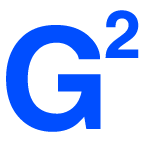
<style>
.page{position:relative;width:151px;height:142px;background:#ffffff}
.page>*{position:absolute;margin:0}
.t1{font:67px "Helvetica_cyr-Bold";color:#004eff}
.t2{font:141px "Helvetica_cyr-Bold";color:#004eff}
</style>
<div class="page">
<p class="t1" style="left:105px;top:10px;width:34px;height:48px">2</p>
<p class="t2" style="left:6px;top:25px;width:95px;height:107px">G</p>
</div>
